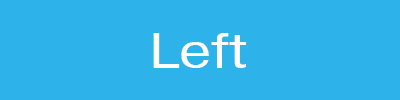
<style>
.page{position:relative;width:400px;height:100px;background:#2db2ea}
.page>*{position:absolute;margin:0}
.t1{font:48px "Helvetica";color:#ffffff;scale:1.2 1}
</style>
<div class="page">
<p class="t1" style="left:153px;top:33px;width:93px;height:35px">Left</p>
</div>
